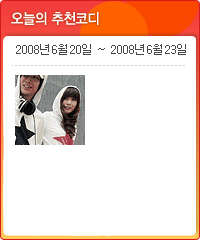
<style>
.page{position:relative;width:200px;height:240px;background:#ffffff}
.page>*{position:absolute;margin:0}
.t1{font:14.8px "YDIYGO340";letter-spacing:-0.025em;color:#ffffff;scale:0.91 1}
.t2{font:12px "Dotum";color:#474747}
</style>
<div class="page">
<p class="t1" style="left:11px;top:12px;width:88px;height:13px">오늘의 추천코디</p>
<p class="t2" style="left:16px;top:44px;width:170px;height:11px">2008년6월20일 ~ 2008년6월23일</p>
</div>
